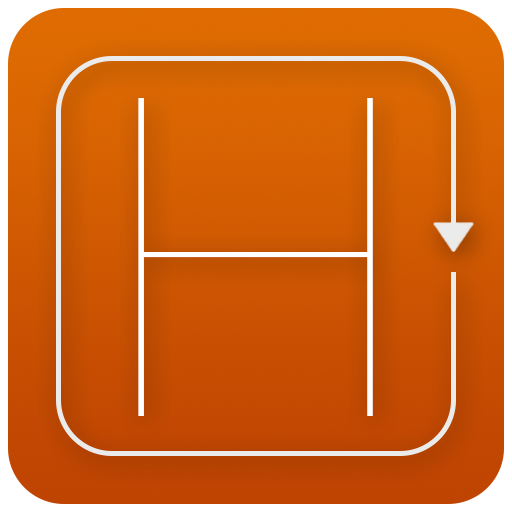
<style>
.page{position:relative;width:512px;height:512px}
.page>*{position:absolute;margin:0}
.t1{font:454px "Lato-Hairline";letter-spacing:0.025em;color:#ffffff}
</style>
<div class="page">
<p class="t1" style="left:138px;top:98px;width:235px;height:318px">H</p>
</div>
